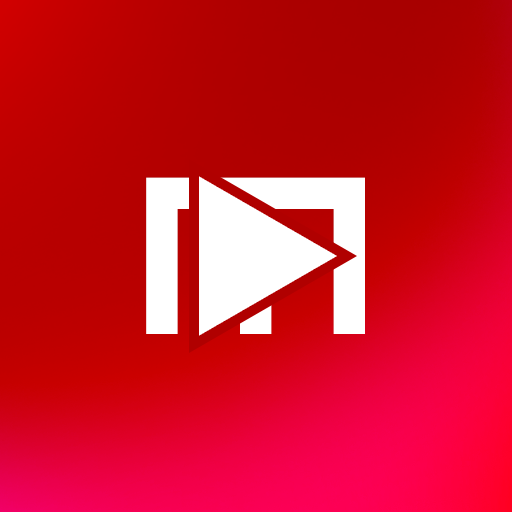
<style>
.page{position:relative;width:512px;height:512px}
.page>*{position:absolute;margin:0}
.t1{font:250px "Hooge0553";color:#ffffff}
</style>
<div class="page">
<p class="t1" style="left:146px;top:177px;width:219px;height:157px">M</p>
</div>
